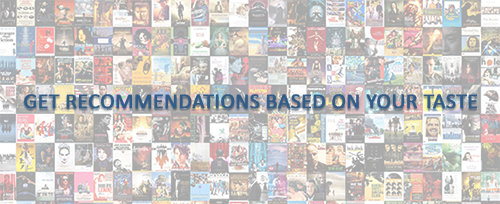
<style>
.page{position:relative;width:500px;height:204px}
.page>*{position:absolute;margin:0}
.t1{font:21.5px "Calibri";color:#325d88;font-weight:bold}
</style>
<div class="page">
<p class="t1" style="left:24px;top:94px;width:454px;height:15px">GET RECOMMENDATIONS BASED ON YOUR TASTE</p>
</div>
